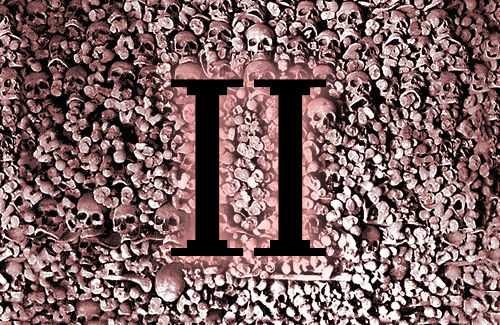
<style>
.page{position:relative;width:500px;height:325px}
.page>*{position:absolute;margin:0}
.t1{font:257px "MS Serif";letter-spacing:-0.02em;color:#000000}
</style>
<div class="page">
<p class="t1" style="left:171px;top:79px;width:156px;height:177px">II</p>
</div>
